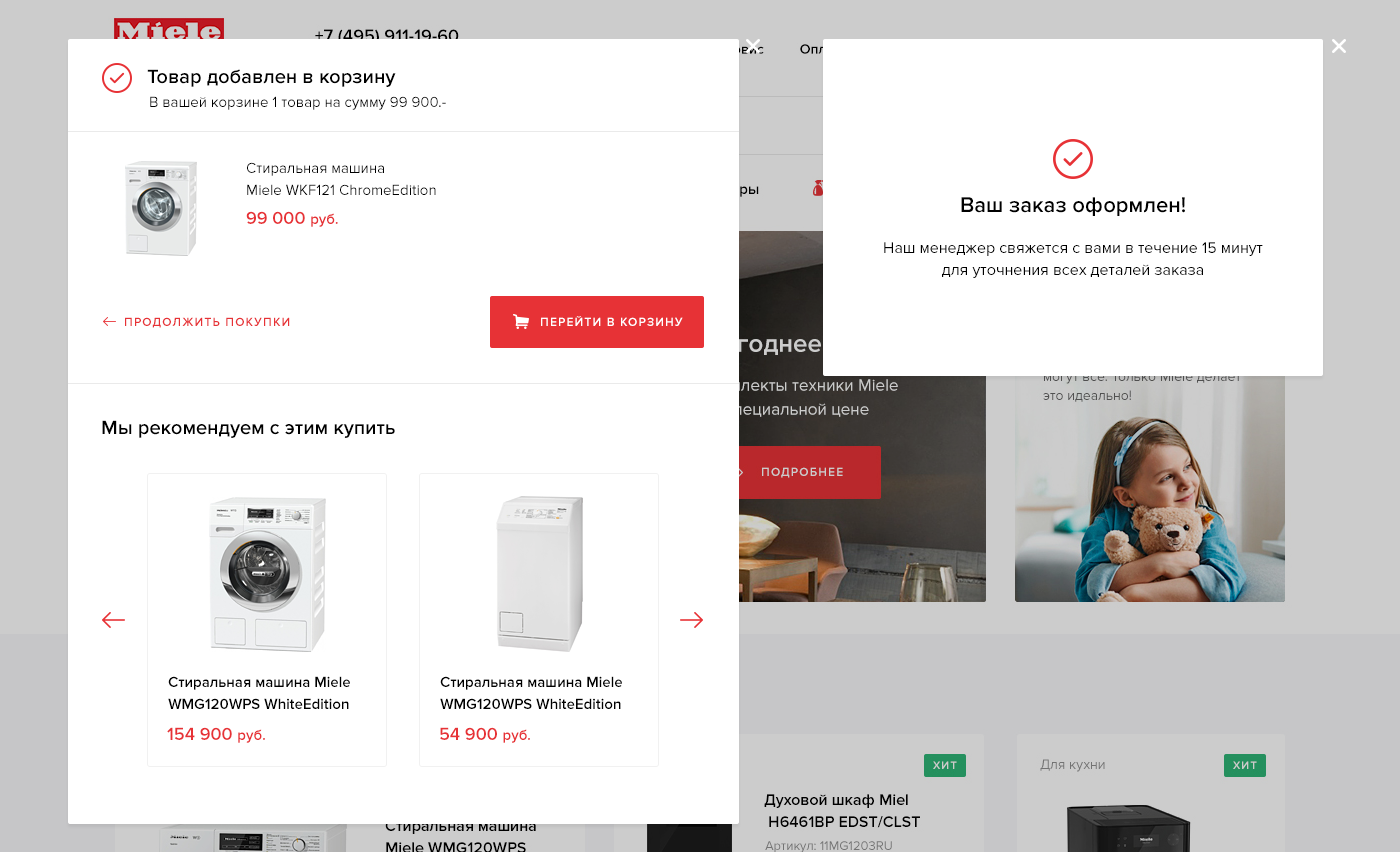
<style>
.page{position:relative;width:1400px;height:852px;background:#ffffff}
.page>*{position:absolute;margin:0}
.t1{font:20px "ProximaNova-Semibold";color:#000000}
.t2{font:15px "ProximaNova-Regular";color:#000000}
.t3{font:15px/22px "ProximaNova-Regular";color:#000000}
.t4{font:22px "ProximaNova-Semibold";color:#000000}
.t5{font:18px "ProximaNova-Semibold";color:#e73236;text-transform:uppercase}
.t6{font:15px "ProximaNova-Semibold";color:#e73236}
.t7{font:16px/22px "ProximaNova-Regular";color:#000000}
.t8{font:12px "ProximaNova-Semibold";letter-spacing:0.1em;color:#e73236;text-transform:uppercase}
.t9{font:12px "ProximaNova-Semibold";letter-spacing:0.1em;color:#ffffff;text-transform:uppercase}
.t10{font:15px/22px "ProximaNova-Semibold";color:#000000}
</style>
<div class="page">
<p class="t1" style="left:147px;top:69px;width:249px;height:18px">Товар добавлен в корзину</p>
<p class="t2" style="left:150px;top:96px;width:296px;height:14px">В вашей корзине 1 товар на сумму 99 900.-</p>
<p class="t3" style="left:247px;top:162px;width:189px;height:33px">Стиральная машина<br>Miele WKF121 ChromeEdition</p>
<p class="t4" style="left:961px;top:197px;width:224px;height:19px">Ваш заказ оформлен!</p>
<p class="t5" style="left:246px;top:211px;width:92px;height:16px">99 000 <span class="t6">руб.</span></p>
<p class="t7" style="left:884px;top:242px;width:379px;height:36px;text-align:center">Наш менеджер свяжется с вами в течение 15 минут<br>для уточнения всех деталей заказа</p>
<p class="t8" style="left:125px;top:317px;width:165px;height:11px">продолжить покупки</p>
<p class="t9" style="left:541px;top:316px;width:142px;height:10px">перейти в корзину</p>
<p class="t1" style="left:102px;top:420px;width:293px;height:18px">Мы рекомендуем с этим купить</p>
<p class="t10" style="left:168px;top:676px;width:182px;height:33px">Стиральная машина Miele<br>WMG120WPS WhiteEdition</p>
<p class="t10" style="left:440px;top:676px;width:182px;height:33px">Стиральная машина Miele<br>WMG120WPS WhiteEdition</p>
<p class="t5" style="left:167px;top:727px;width:98px;height:16px">154 900 <span class="t6">руб.</span></p>
<p class="t5" style="left:440px;top:727px;width:90px;height:16px">54 900 <span class="t6">руб.</span></p>
</div>
